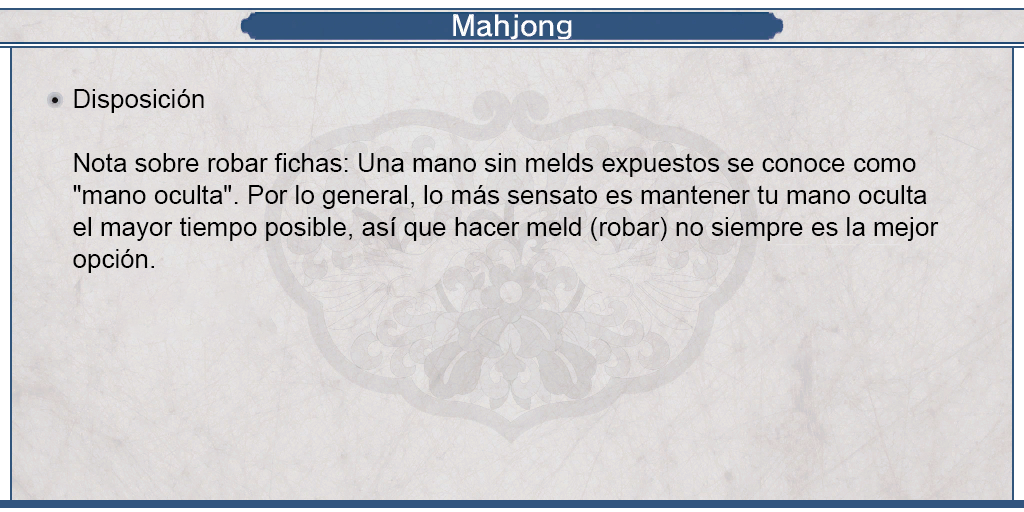
<style>
.page{position:relative;width:1024px;height:512px}
.page>*{position:absolute;margin:0}
.t1{font:26px "ArialMT";color:#000000}
.t2{font:26px/32px "ArialMT";color:#000000}
</style>
<div class="page">
<p class="t1" style="left:74px;top:89px;width:130px;height:24px">Disposición</p>
<p class="t2" style="left:73px;top:153px;width:866px;height:120px;text-align:justify">Nota sobre robar fichas: Una mano sin melds expuestos se conoce como <br>"mano oculta". Por lo general, lo más sensato es mantener tu mano oculta <br>el mayor tiempo posible, así que hacer meld (robar) no siempre es la mejor <br>opción.</p>
</div>
